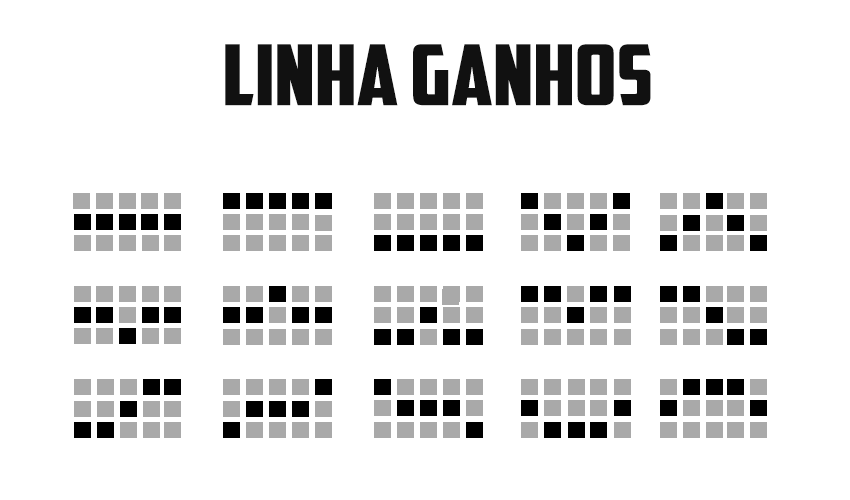
<style>
.page{position:relative;width:850px;height:500px;background:#ffffff}
.page>*{position:absolute;margin:0}
.t1{font:84.2px "AmericanCaptain";color:#111111;scale:1.14 1}
</style>
<div class="page">
<p class="t1" style="left:225px;top:44px;width:426px;height:62px">linha ganhos</p>
</div>
